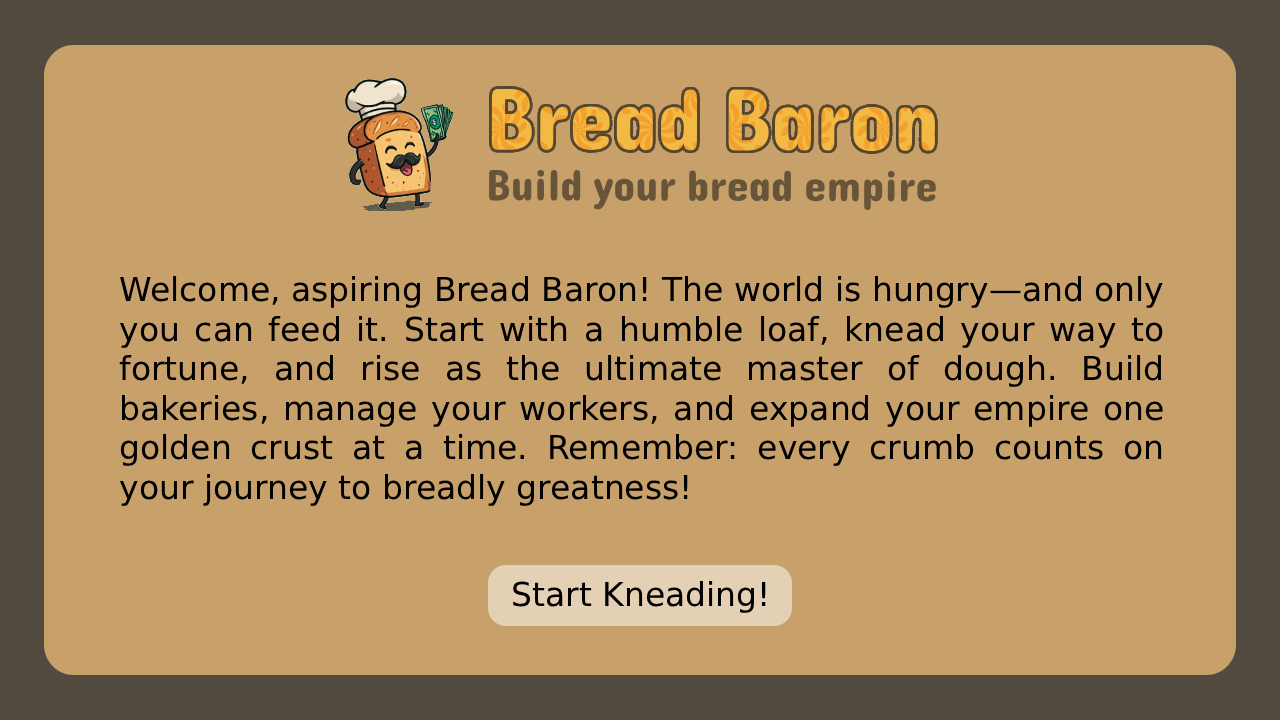
<style>
.page{position:relative;width:1280px;height:720px;background:#c8a16a}
.page>*{position:absolute;margin:0}
.t1{font:33px "DejaVuSans";color:#000000}
</style>
<div class="page">
<p class="t1" style="left:119px;top:275px;width:1044px;height:231px;text-align:justify">Welcome, aspiring Bread Baron! The world is hungry—and only you can feed it. Start with a humble loaf, knead your way to fortune, and rise as the ultimate master of dough. Build bakeries, manage your workers, and expand your empire one golden crust at a time. Remember: every crumb counts on your journey to breadly greatness!</p>
<p class="t1" style="left:513px;top:580px;width:253px;height:33px">Start Kneading!</p>
</div>
